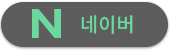
<style>
.page{position:relative;width:172px;height:51px;background:#5d5d5d}
.page>*{position:absolute;margin:0}
.t1{font:20px "NotoSansKR-Medium";color:#6bd89e}
</style>
<div class="page">
<p class="t1" style="left:81px;top:15px;width:52px;height:19px">네이버</p>
</div>
